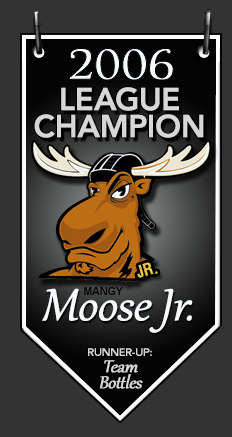
<style>
.page{position:relative;width:232px;height:437px;background:#333333}
.page>*{position:absolute;margin:0}
.t1{font:45px "Marion-Regular";letter-spacing:-0.025em;color:#f6fafa;font-weight:bold;scale:1.2 1}
.t2{font:31px/27px "Avenir-Heavy";letter-spacing:-0.025em;color:#d7d7d7;font-weight:bold}
.t3{font:13.6px "VIPERNORA";letter-spacing:0.1em;color:#f6d243}
.t4{font:55px "Gabriola";letter-spacing:-0.025em;color:#f6fafa;font-weight:bold;font-style:italic}
.t5{font:11px "Arial-BoldMT";letter-spacing:-0.025em;color:#000000}
.t6{font:21px/16px "Gabriola";letter-spacing:-0.025em;color:#d7d7d7;font-weight:bold;font-style:italic}
.t7{font:11px/16px "Avenir-Heavy";letter-spacing:-0.025em;color:#d7d7d7}
</style>
<div class="page">
<p class="t1" style="left:69px;top:48px;width:105px;height:32px">2006</p>
<p class="t2" style="left:34px;top:87px;width:170px;height:51px;text-align:center">LEAGUE<br>CHAMPION</p>
<p class="t3" style="left:137px;top:262px;width:21px;height:16px;rotate:-16deg">Jr.</p>
<p class="t4" style="left:42px;top:288px;width:151px;height:45px">Moose Jr.</p>
<p class="t5" style="left:84px;top:287px;width:39px;height:8px">MANGY</p>
<p class="t6" style="left:88px;top:348px;width:64px;height:41px;text-align:center"><span class="t7">RUNNER-UP:<br></span>Team<br>Bottles</p>
</div>
